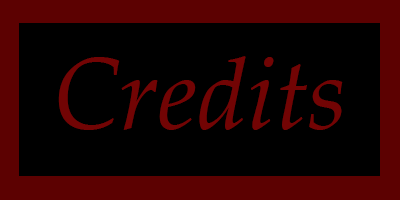
<style>
.page{position:relative;width:400px;height:200px;background:#000000}
.page>*{position:absolute;margin:0}
.t1{font:100px "PalatinoLinotype-Italic";color:#720404}
</style>
<div class="page">
<p class="t1" style="left:58px;top:56px;width:285px;height:74px">Credits</p>
</div>
